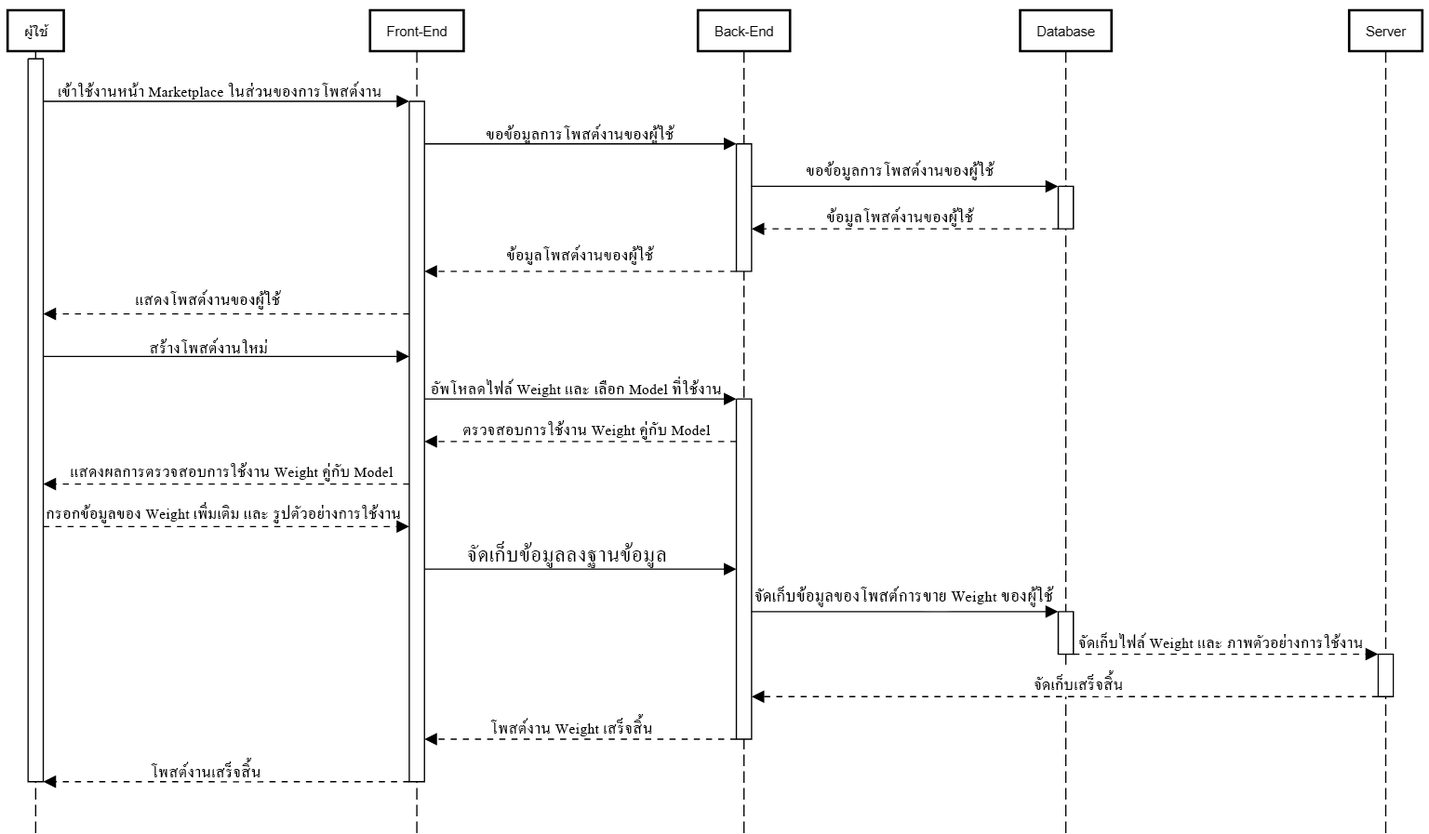
<style>
.page{position:relative;width:1429px;height:834px;background:#ffffff}
.page>*{position:absolute;margin:0}
.t1{font:21.4px "AngsanaNew";letter-spacing:0.02em;color:#000000}
.t2{font:27.9px "AngsanaNew";letter-spacing:0.02em;color:#000000}
.t3{font:22.3px "AngsanaNew";letter-spacing:0.02em;color:#000000}
</style>
<div class="page">
<p class="t1" style="left:58px;top:81px;width:323px;height:19px">เข้าใช้งานหน้า Marketplace ในส่วนของการโพสต์งาน</p>
<p class="t1" style="left:487px;top:124px;width:187px;height:20px">ขอข้อมูลการโพสต์งานของผู้ใช้</p>
<p class="t1" style="left:807px;top:160px;width:187px;height:20px">ขอข้อมูลการโพสต์งานของผู้ใช้</p>
<p class="t1" style="left:827px;top:207px;width:147px;height:20px">ข้อมูลโพสต์งานของผู้ใช้</p>
<p class="t1" style="left:507px;top:245px;width:147px;height:20px">ข้อมูลโพสต์งานของผู้ใช้</p>
<p class="t1" style="left:136px;top:289px;width:145px;height:21px">แสดงโพสต์งานของผู้ใช้</p>
<p class="t1" style="left:150px;top:338px;width:117px;height:16px">สร้างโพสต์งานใหม่</p>
<p class="t1" style="left:431px;top:377px;width:290px;height:20px">อัพโหลดไฟล์ Weight และ เลือก Model ที่ใช้งาน</p>
<p class="t1" style="left:463px;top:420px;width:247px;height:20px">ตรวจสอบการใช้งาน Weight คู่กับ Model</p>
<p class="t1" style="left:71px;top:462px;width:322px;height:20px">แสดงผลการตรวจสอบการใช้งาน Weight คู่กับ Model</p>
<p class="t1" style="left:47px;top:502px;width:353px;height:22px">กรอกข้อมูลของ Weight เพิ่มเติม และ รูปตัวอย่างการใช้งาน</p>
<p class="t2" style="left:468px;top:541px;width:198px;height:27px">จัดเก็บข้อมูลลงฐานข้อมูล</p>
<p class="t3" style="left:754px;top:586px;width:300px;height:21px">จัดเก็บข้อมูลของโพสต์การขาย Weight ของผู้ใช้</p>
<p class="t1" style="left:1078px;top:633px;width:285px;height:18px">จัดเก็บไฟล์ Weight และ ภาพตัวอย่างการใช้งาน</p>
<p class="t1" style="left:1034px;top:671px;width:89px;height:19px">จัดเก็บเสร็จสิ้น</p>
<p class="t1" style="left:490px;top:714px;width:162px;height:23px">โพสต์งาน Weight เสร็จสิ้น</p>
<p class="t1" style="left:151px;top:758px;width:109px;height:20px">โพสต์งานเสร็จสิ้น</p>
</div>
